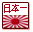
<style>
.page{position:relative;width:33px;height:32px;background:#ffffff}
.page>*{position:absolute;margin:0}
.t1{font:10.4px "SimSun";letter-spacing:-0.25em;color:#ae0012}
</style>
<div class="page">
<p class="t1" style="left:4px;top:4px;width:23px;height:9px">日本一</p>
</div>
